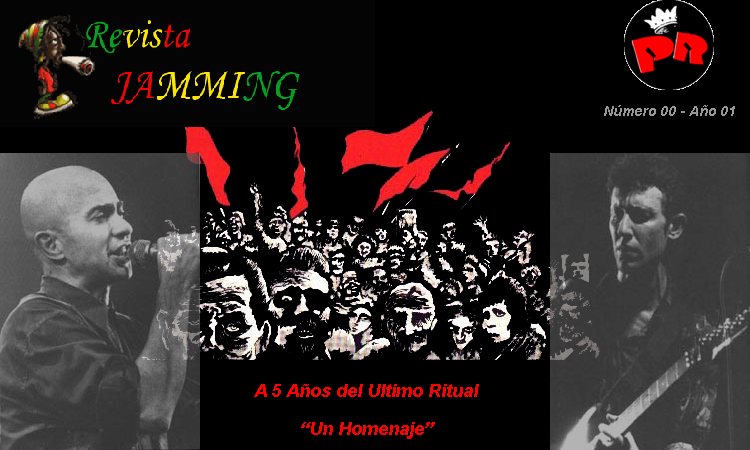
<style>
.page{position:relative;width:750px;height:450px;background:#000000}
.page>*{position:absolute;margin:0}
.t1{font:14px "Arial-BoldItalicMT";color:#989898}
.t2{font:18px "Arial-BoldItalicMT";color:#ff0000}
</style>
<div class="page">
<p class="t1" style="left:604px;top:105px;width:131px;height:11px">Número 00 - Año 01</p>
<p class="t2" style="left:254px;top:384px;width:225px;height:55px;text-align:center">A 5 Años del Ultimo Ritual<br><br>“Un Homenaje”</p>
</div>
